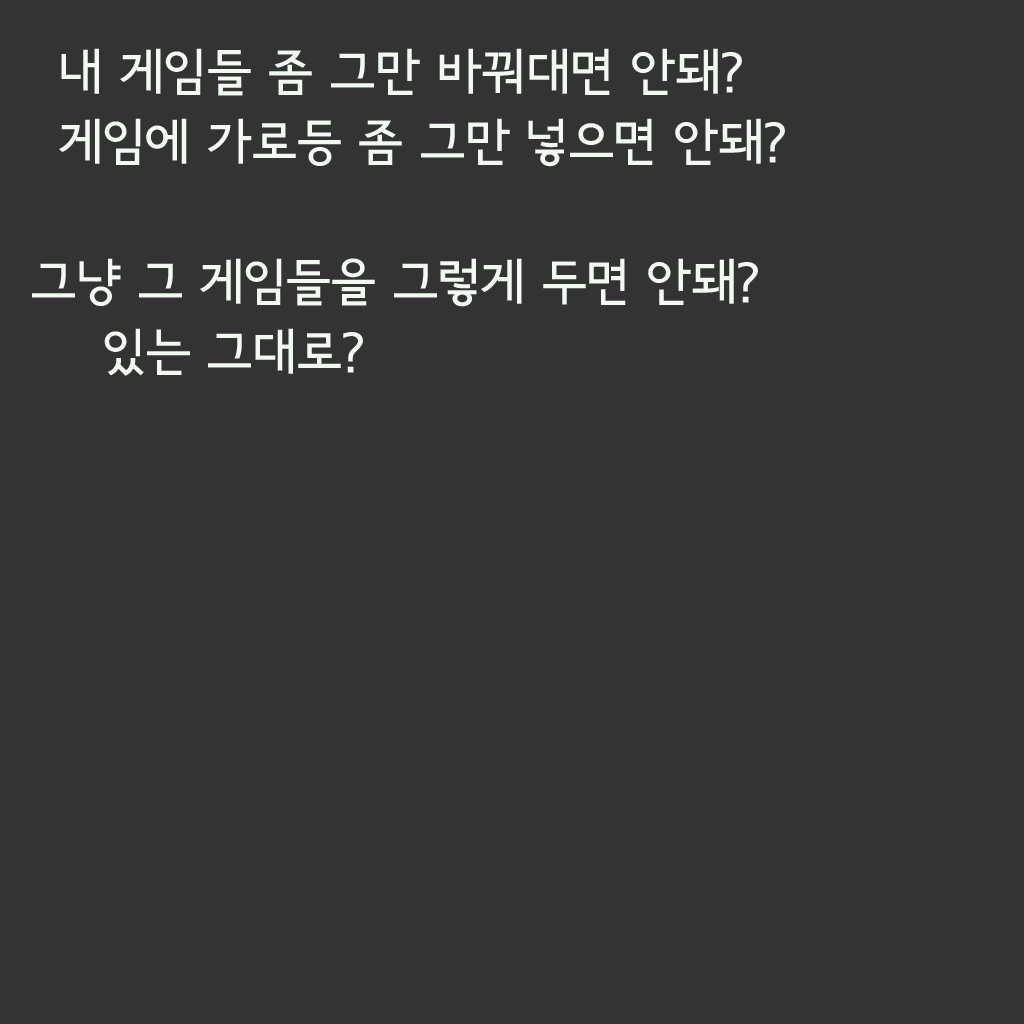
<style>
.page{position:relative;width:1024px;height:1024px;background:#333333}
.page>*{position:absolute;margin:0}
.t1{font:50px/70px "SeoulNamsanB";color:#f1f9f1}
</style>
<div class="page">
<p class="t1" style="left:59px;top:48px;width:726px;height:119px">내 게임들 좀 그만 바꿔대면 안돼?<br>게임에 가로등 좀 그만 넣으면 안돼?</p>
<p class="t1" style="left:32px;top:258px;width:726px;height:118px">그냥 그 게임들을 그렇게 두면 안돼?<br>  있는 그대로?</p>
</div>
